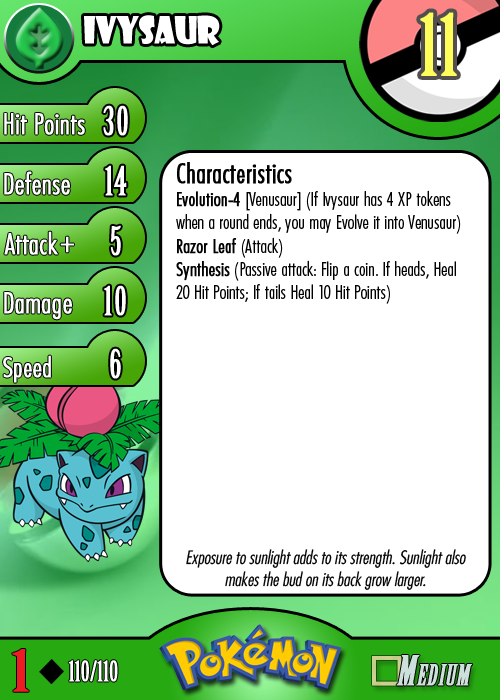
<style>
.page{position:relative;width:500px;height:700px;background:#ffffff}
.page>*{position:absolute;margin:0}
.t1{font:36.7px "ShowcardGothic-Reg";letter-spacing:-0.025em;color:#ffffff;scale:0.91 1}
.t2{font:83.3px "BirchStd";letter-spacing:0.025em;color:#fffd59;font-weight:bold}
.t3{font:27.8px "Futura-CondensedLight";color:#ffffff;font-weight:bold}
.t4{font:38.9px "BirchStd";letter-spacing:0.035em;color:#ffffff;font-weight:bold}
.t5{font:19.4px "FuturaCondensedBQ-Light";color:#010101}
.t6{font:27.8px "FuturaCondensedBQ-Light";color:#010101;font-weight:bold}
.t7{font:19.4px "FuturaCondensedBQ-Light";color:#010101;font-weight:bold}
.t8{font:30.6px "Futura-CondensedLight";color:#ffffff;font-weight:bold}
.t9{font:27.8px "FuturaCondensedBQ-Light";color:#ffffff;font-weight:bold}
.t10{font:18.1px "Futura-CondensedLight";color:#010101;font-style:italic}
.t11{font:55.6px "BirchStd";color:#ed1c24;font-weight:bold;scale:1.5 1}
.t12{font:27.8px "BirchStd";color:#ffffff;font-weight:bold}
</style>
<div class="page">
<p class="t1" style="left:84px;top:15px;width:136px;height:31px">ivysaur</p>
<p class="t2" style="left:420px;top:12px;width:37px;height:64px">11</p>
<p class="t3" style="left:4px;top:113px;width:81px;height:22px">Hit Points</p>
<p class="t4" style="left:103px;top:105px;width:25px;height:31px">30</p>
<p class="t3" style="left:4px;top:171px;width:66px;height:24px">Defense</p>
<p class="t4" style="left:105px;top:165px;width:22px;height:31px">14</p>
<p class="t5" style="left:176px;top:162px;width:285px;height:142px"><span class="t6">Characteristics<br></span><span class="t7">Evolution-4 </span>[Venusaur] (If Ivysaur has 4 XP tokens when a round ends, you may Evolve it into Venusaur)<br><span class="t7">Razor Leaf</span> (Attack)<br><span class="t7">Synthesis</span> (Passive attack: Flip a coin. If heads, Heal 20 Hit Points; If tails Heal 10 Hit Points)</p>
<p class="t3" style="left:4px;top:231px;width:54px;height:24px">Attack</p>
<p class="t4" style="left:111px;top:225px;width:10px;height:31px">5</p>
<p class="t8" style="left:60px;top:236px;width:14px;height:17px">+</p>
<p class="t3" style="left:4px;top:292px;width:68px;height:28px">Damage</p>
<p class="t4" style="left:104px;top:285px;width:22px;height:31px">10</p>
<p class="t4" style="left:110px;top:348px;width:11px;height:31px">6</p>
<p class="t9" style="left:3px;top:355px;width:48px;height:28px">Speed</p>
<p class="t10" style="left:186px;top:549px;width:280px;height:41px;text-align:center">Exposure to sunlight adds to its strength. Sunlight also makes the bud on its back grow larger.</p>
<p class="t11" style="left:12px;top:649px;width:17px;height:43px">1</p>
<p class="t12" style="left:68px;top:660px;width:50px;height:22px">110/110</p>
</div>
